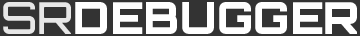
<style>
.page{position:relative;width:360px;height:36px;background:#333333}
.page>*{position:absolute;margin:0}
.t1{font:44px "Orbitron-Black";color:#ffffff}
.t2{font:44px "Orbitron-Medium";color:#e7e7e7}
</style>
<div class="page">
<p class="t1" style="left:3px;top:2px;width:354px;height:32px"><span class="t2">SR</span>DEBUGGER</p>
</div>
